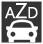
<style>
.page{position:relative;width:43px;height:44px;background:#333333}
.page>*{position:absolute;margin:0}
.t1{font:15.8px "SegoeUI";letter-spacing:-0.01em;color:#ffffff}
.t2{font:21.4px "SegoeUI";letter-spacing:-0.01em;color:#ffffff}
</style>
<div class="page">
<p class="t1" style="left:5px;top:3px;width:33px;height:16px">A<span class="t2">Z</span>D</p>
</div>
